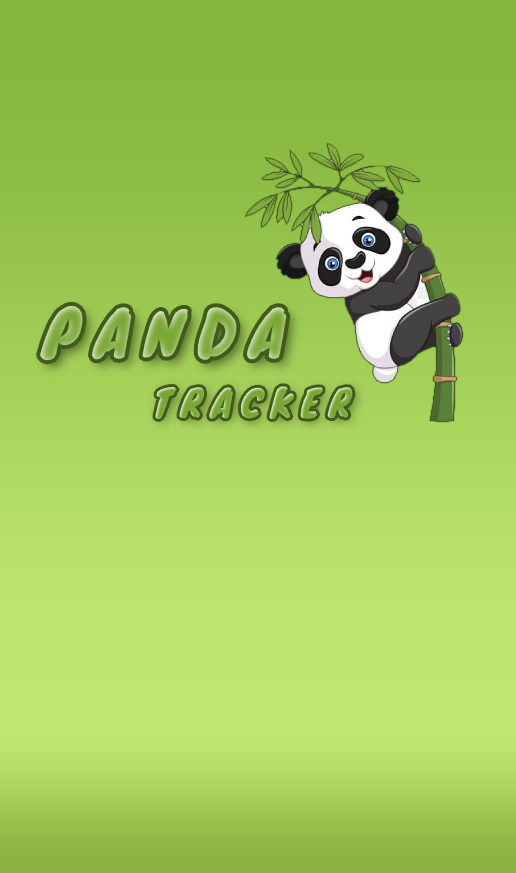
<style>
.page{position:relative;width:516px;height:873px}
.page>*{position:absolute;margin:0}
.t1{font:62px "Knewave-Regular";letter-spacing:0.237em}
.t2{font:37px "Knewave-Regular";letter-spacing:0.237em}
</style>
<div class="page">
<p class="t1" style="left:40px;top:305px;width:247px;height:56px">PANDA</p>
<p class="t2" style="left:154px;top:386px;width:199px;height:34px">TRACKER</p>
</div>
